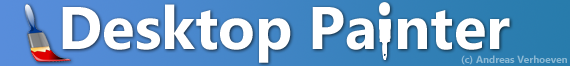
<style>
.page{position:relative;width:570px;height:66px;background:#ffffff}
.page>*{position:absolute;margin:0}
.t1{font:60px "SegoeUI-Bold";color:#ffffff}
.t2{font:10px "SegoeUI-Bold";color:#8cb9d4}
</style>
<div class="page">
<p class="t1" style="left:62px;top:4px;width:448px;height:59px">Desktop Pa nter</p>
<p class="t2" style="left:461px;top:55px;width:106px;height:10px">(c) Andreas Verhoeven</p>
</div>
